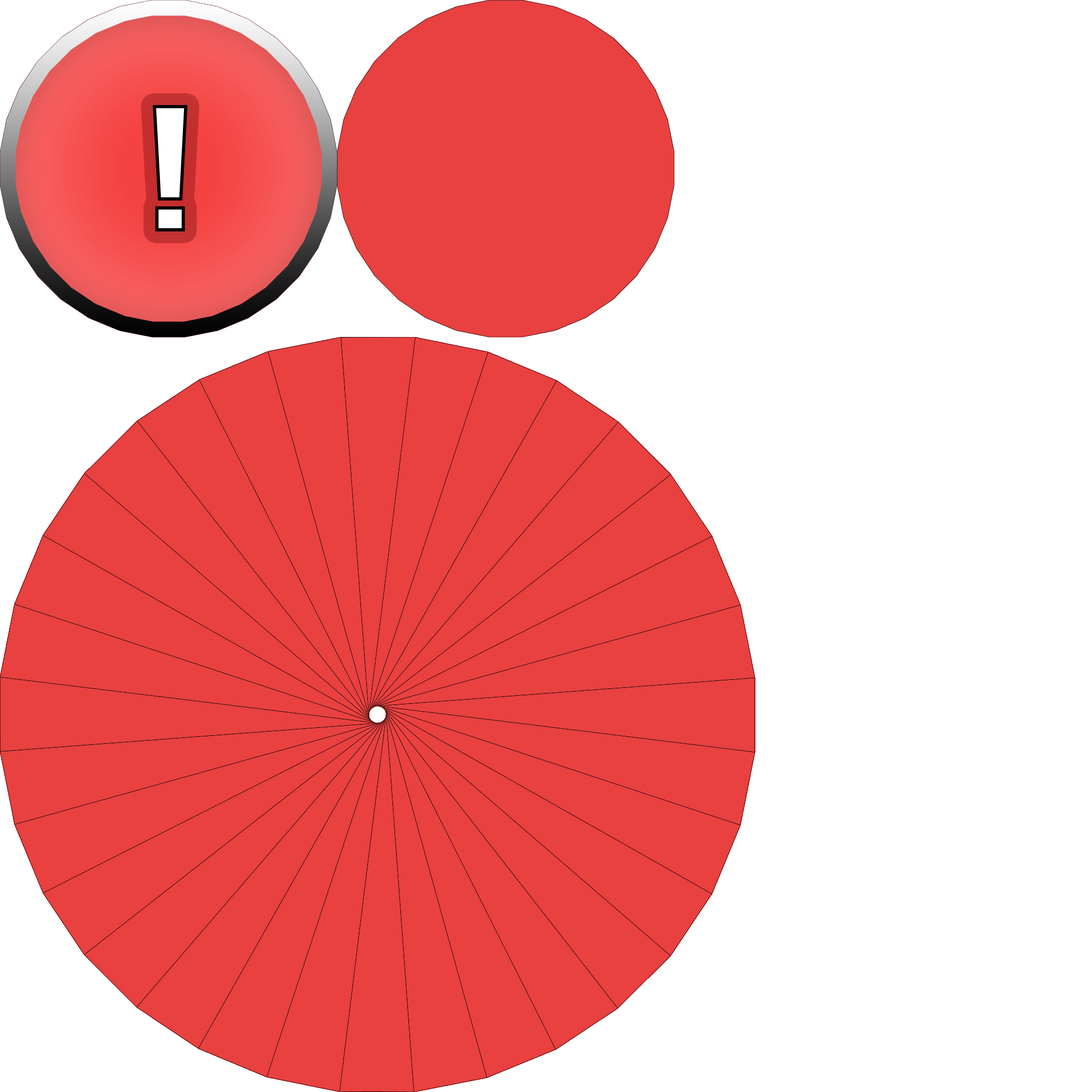
<style>
.page{position:relative;width:1092px;height:1092px;background:#ffffff}
.page>*{position:absolute;margin:0}
.t1{font:160px "Impact"}
</style>
<div class="page">
<p class="t1" style="left:152px;top:105px;width:36px;height:126px">!</p>
</div>
